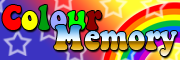
<style>
.page{position:relative;width:180px;height:60px}
.page>*{position:absolute;margin:0}
.t1{font:33px "KeeponTruckin";color:#ff0000}
.t2{font:33px "KeeponTruckin";color:#fcff00}
.t3{font:33px "KeeponTruckin";color:#009d0f}
.t4{font:33px "KeeponTruckin";color:#9ca8ff}
.t5{font:33px "KeeponTruckin";color:#00ff00}
.t6{font:33px "KeeponTruckin";color:#8c0000}
.t7{font:33px "KeeponTruckin"}
</style>
<div class="page">
<p class="t1" style="left:2px;top:5px;width:100px;height:25px">C<span class="t2">o</span><span class="t3">l</span><span class="t4">o</span><span class="t5">u</span><span class="t6">r</span></p>
<p class="t7" style="left:54px;top:25px;width:123px;height:31px">Memory</p>
</div>
